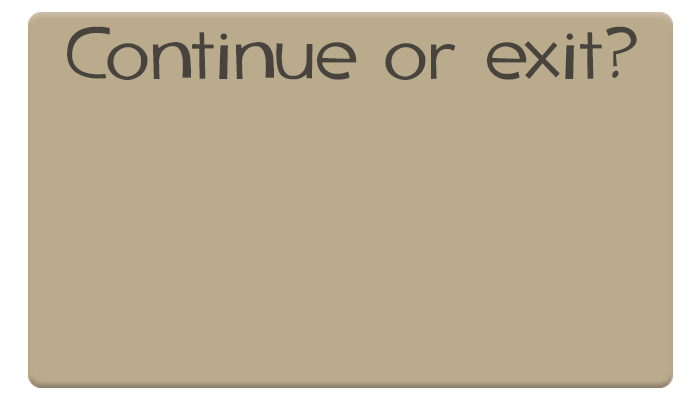
<style>
.page{position:relative;width:700px;height:400px;background:#baab8d}
.page>*{position:absolute;margin:0}
.t1{font:75px "TF2Secondary";color:#47443e}
</style>
<div class="page">
<p class="t1" style="left:67px;top:26px;width:570px;height:54px">Continue or exit?</p>
</div>
